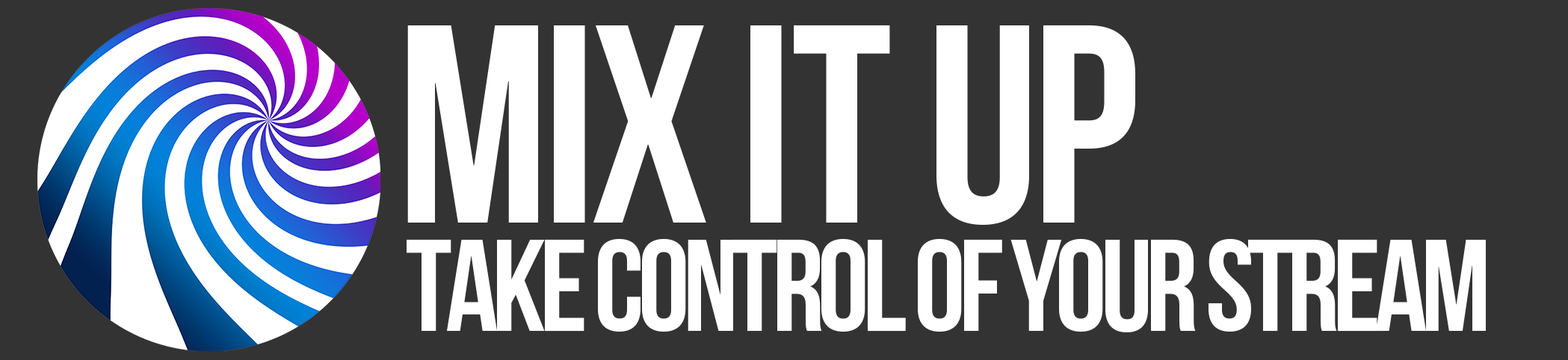
<style>
.page{position:relative;width:1568px;height:360px;background:#333333}
.page>*{position:absolute;margin:0}
.t1{font:281.4px "BebasNeue";letter-spacing:-0.025em;color:#ffffff}
.t2{font:281.4px "BebasNeue";letter-spacing:-0.005em;color:#ffffff}
.t3{font:129.9px "BebasNeue";letter-spacing:-0.05em;color:#ffffff}
</style>
<div class="page">
<p class="t1" style="left:407px;top:25px;width:728px;height:200px">MIX <span class="t2">IT</span> UP</p>
<p class="t3" style="left:407px;top:238px;width:1079px;height:95px">TAKE CONTROL OF YOUR STREAM</p>
</div>
